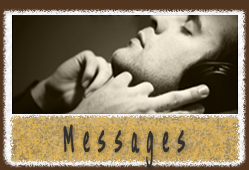
<style>
.page{position:relative;width:249px;height:170px}
.page>*{position:absolute;margin:0}
.t1{font:44.2px "BuxtonSketch";letter-spacing:0.5em;color:#322f2f;font-weight:bold;scale:0.38 1}
</style>
<div class="page">
<p class="t1" style="left:63px;top:124px;width:122px;height:45px">Messages</p>
</div>
